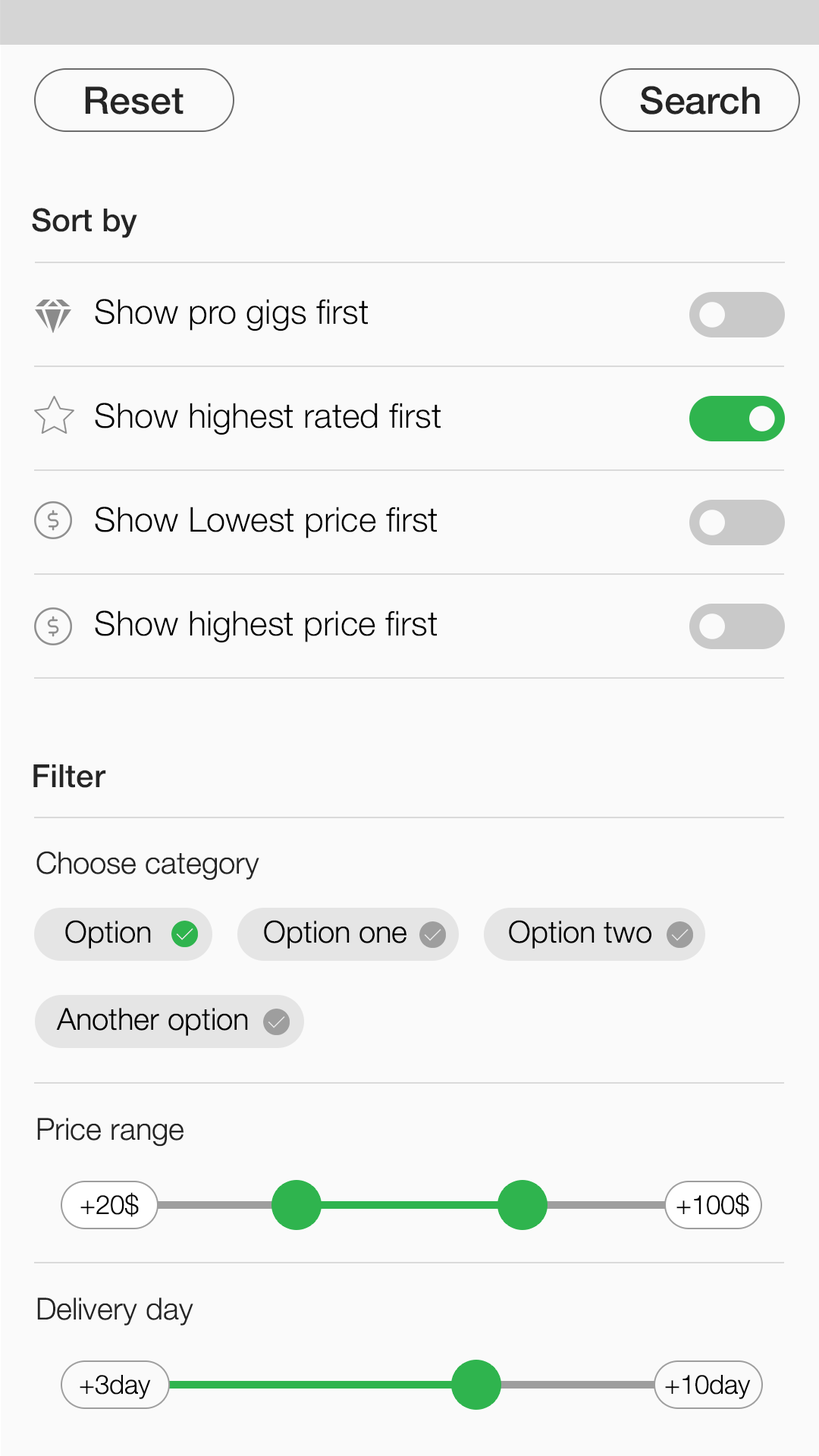
<style>
.page{position:relative;width:819px;height:1456px;background:#fafafa}
.page>*{position:absolute;margin:0}
.t1{font:37.9px "HelveticaNeue-Medium";color:#252525}
.t2{font:31.8px "HelveticaNeue-Medium";color:#252525}
.t3{font:34.1px "HelveticaNeue-Light";color:#000000}
.t4{font:30.3px "HelveticaNeue-Light";color:#252525}
.t5{font:30.3px "HelveticaNeue-Light";color:#000000}
.t6{font:26.5px "HelveticaNeue-Light";color:#000000}
</style>
<div class="page">
<p class="t1" style="left:85px;top:86px;width:99px;height:29px">Reset</p>
<p class="t1" style="left:640px;top:86px;width:120px;height:29px">Search</p>
<p class="t2" style="left:32px;top:208px;width:105px;height:30px">Sort by</p>
<p class="t3" style="left:95px;top:299px;width:273px;height:32px">Show pro gigs first</p>
<p class="t3" style="left:95px;top:403px;width:346px;height:32px">Show highest rated first</p>
<p class="t3" style="left:95px;top:507px;width:342px;height:31px">Show Lowest price first</p>
<p class="t3" style="left:95px;top:610px;width:342px;height:33px">Show highest price first</p>
<p class="t2" style="left:33px;top:764px;width:73px;height:24px">Filter</p>
<p class="t4" style="left:36px;top:851px;width:223px;height:29px">Choose category</p>
<p class="t5" style="left:65px;top:920px;width:86px;height:29px">Option</p>
<p class="t5" style="left:264px;top:920px;width:142px;height:29px">Option one</p>
<p class="t5" style="left:509px;top:920px;width:142px;height:29px">Option two</p>
<p class="t5" style="left:56px;top:1008px;width:192px;height:28px">Another option</p>
<p class="t4" style="left:37px;top:1118px;width:147px;height:29px">Price range</p>
<p class="t6" style="left:80px;top:1192px;width:59px;height:25px">+20$</p>
<p class="t6" style="left:676px;top:1192px;width:73px;height:25px">+100$</p>
<p class="t4" style="left:37px;top:1297px;width:156px;height:29px">Delivery day</p>
<p class="t6" style="left:80px;top:1375px;width:71px;height:24px">+3day</p>
<p class="t6" style="left:665px;top:1375px;width:86px;height:24px">+10day</p>
</div>
